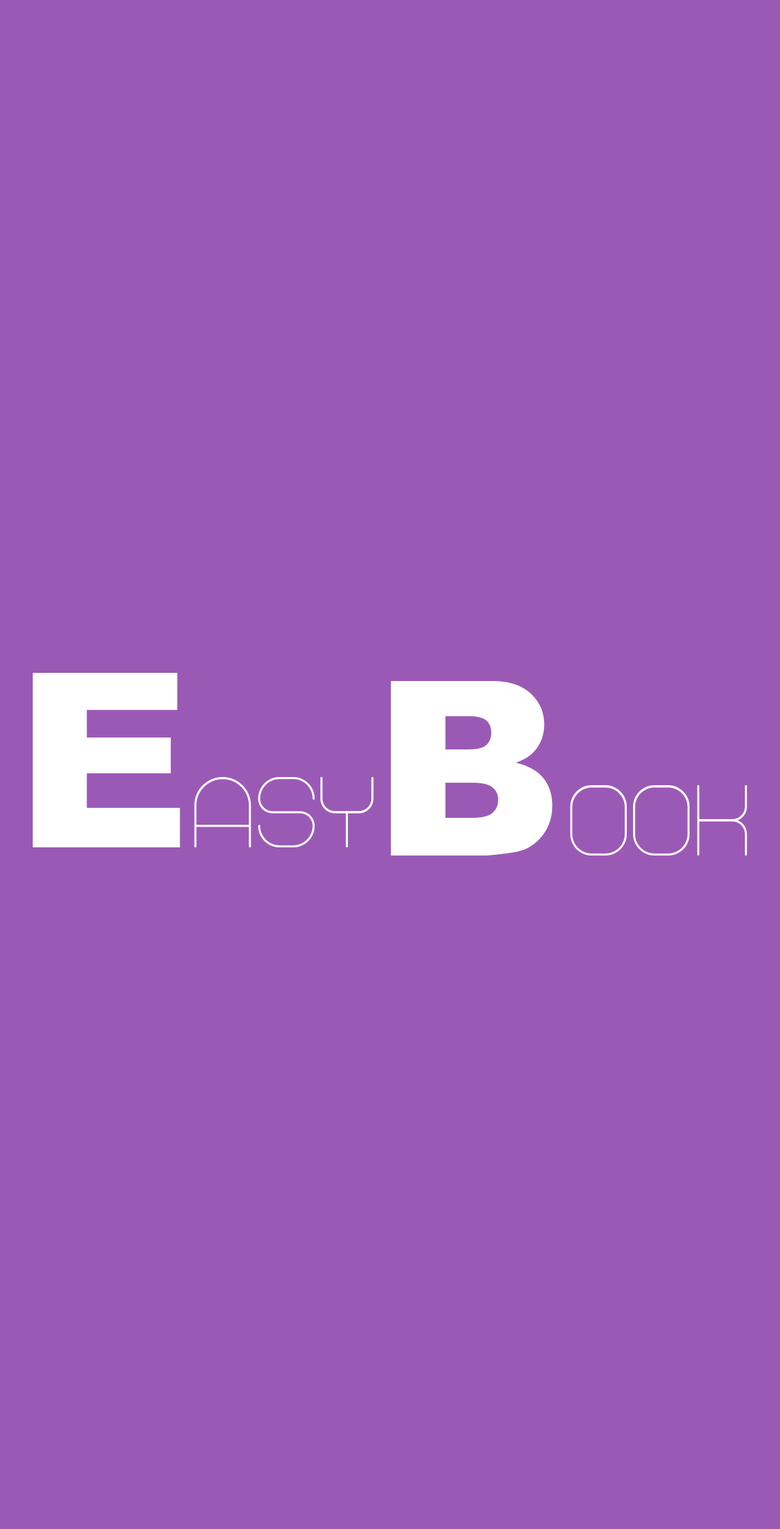
<style>
.page{position:relative;width:780px;height:1529px;background:#9b59b6}
.page>*{position:absolute;margin:0}
.t1{font:243.4px "Arial-Black";color:#ffffff}
.t2{font:103.1px "Abandoned-Regular";color:#ffffff}
</style>
<div class="page">
<p class="t1" style="left:33px;top:673px;width:147px;height:175px">E</p>
<p class="t1" style="left:390px;top:681px;width:162px;height:175px">B</p>
<p class="t2" style="left:194px;top:777px;width:180px;height:71px">asy</p>
<p class="t2" style="left:570px;top:785px;width:177px;height:71px">ook</p>
</div>
